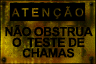
<style>
.page{position:relative;width:96px;height:64px;background:#000000}
.page>*{position:absolute;margin:0}
.t1{font:12.5px/10.7px "Arial-BoldMT";letter-spacing:-0.04em;color:#000000;text-transform:uppercase}
</style>
<div class="page">
<p class="t1" style="left:5px;top:25px;width:88px;height:33px;text-align:center">Não obstrua<br>O  TESTE de<br>CHAMAS</p>
</div>
